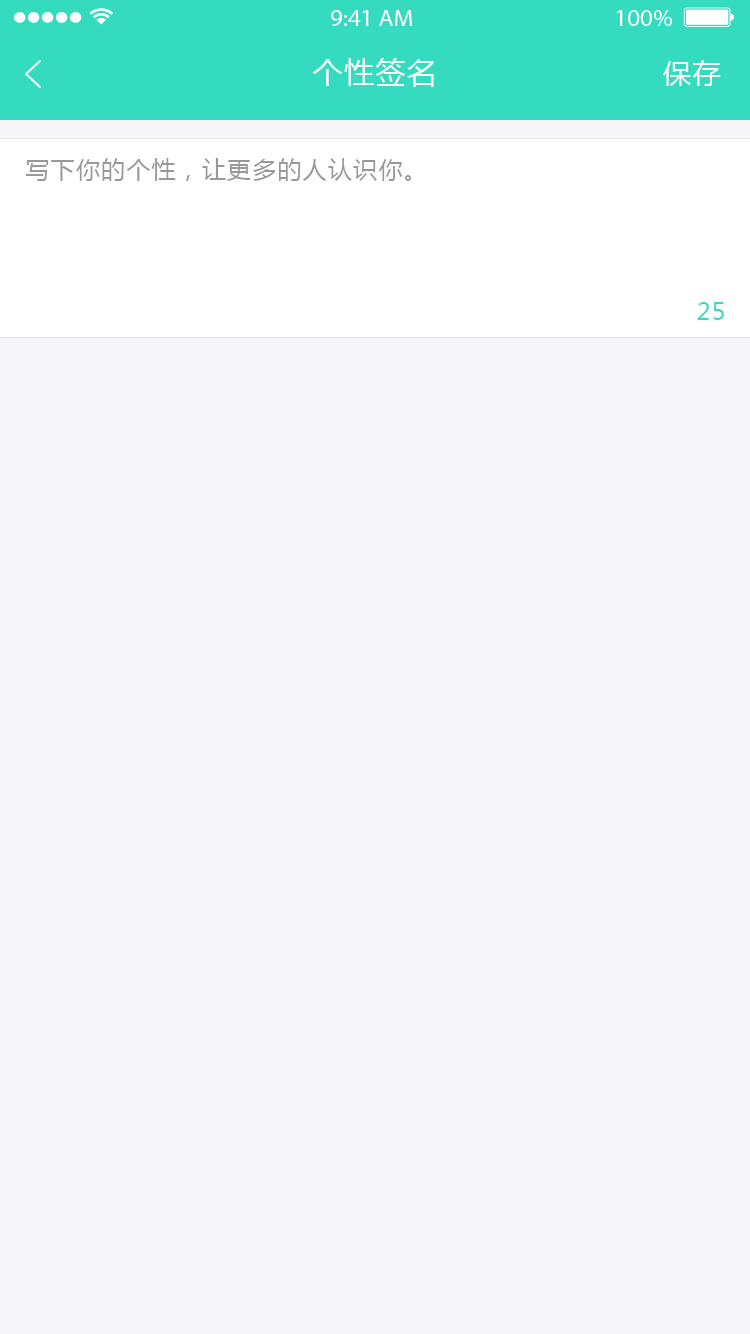
<style>
.page{position:relative;width:750px;height:1334px;background:#f6f5fa}
.page>*{position:absolute;margin:0}
.t1{font:30px "MicrosoftYaHei";letter-spacing:0.05em;color:#ffffff}
.t2{font:28px "MicrosoftYaHei";letter-spacing:0.05em;color:#ffffff}
.t3{font:24px "MicrosoftYaHei";letter-spacing:0.05em;color:#999999}
.t4{font:24px "MicrosoftYaHei";letter-spacing:0.05em;color:#34dbbf}
</style>
<div class="page">
<p class="t1" style="left:312px;top:58px;width:122px;height:29px">个性签名</p>
<p class="t2" style="left:663px;top:60px;width:58px;height:26px">保存</p>
<p class="t3" style="left:26px;top:158px;width:385px;height:23px">写下你的个性，让更多的人认识你。</p>
<p class="t4" style="left:697px;top:302px;width:27px;height:18px">25</p>
</div>
